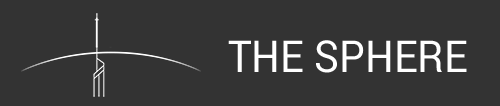
<style>
.page{position:relative;width:500px;height:106px;background:#333333}
.page>*{position:absolute;margin:0}
.t1{font:44.1px "Roboto-Regular";color:#ffffff;text-transform:uppercase;scale:0.92 1}
</style>
<div class="page">
<p class="t1" style="left:228px;top:40px;width:239px;height:33px">THE SPHERE</p>
</div>
